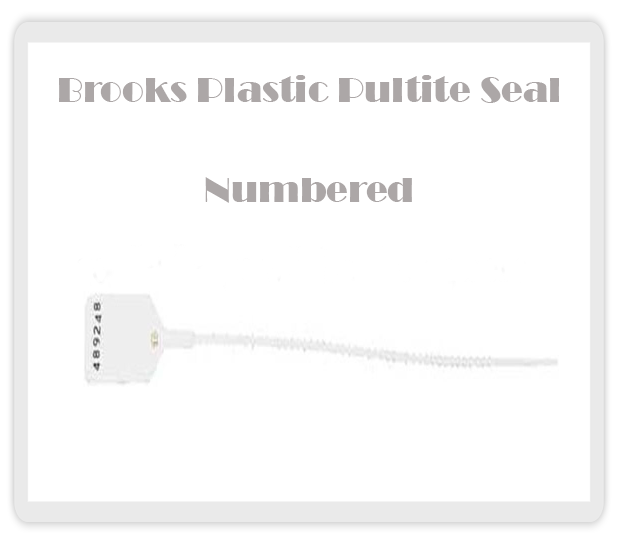
<style>
.page{position:relative;width:618px;height:544px;background:#ffffff}
.page>*{position:absolute;margin:0}
.t1{font:36px/100px "Broadway";color:#aca7a7}
</style>
<div class="page">
<p class="t1" style="left:59px;top:75px;width:500px;height:128px;text-align:center">Brooks Plastic Pultite Seal<br>Numbered</p>
</div>
